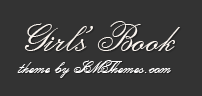
<style>
.page{position:relative;width:202px;height:96px;background:#333333}
.page>*{position:absolute;margin:0}
.t1{font:40px "CalligraphiaTwo";color:#ffffff}
.t2{font:18px "CalligraphiaTwo";color:#fffefe}
</style>
<div class="page">
<p class="t1" style="left:24px;top:21px;width:156px;height:30px">Girls’Book</p>
<p class="t2" style="left:17px;top:60px;width:154px;height:18px">theme by SMThemes.com</p>
</div>
